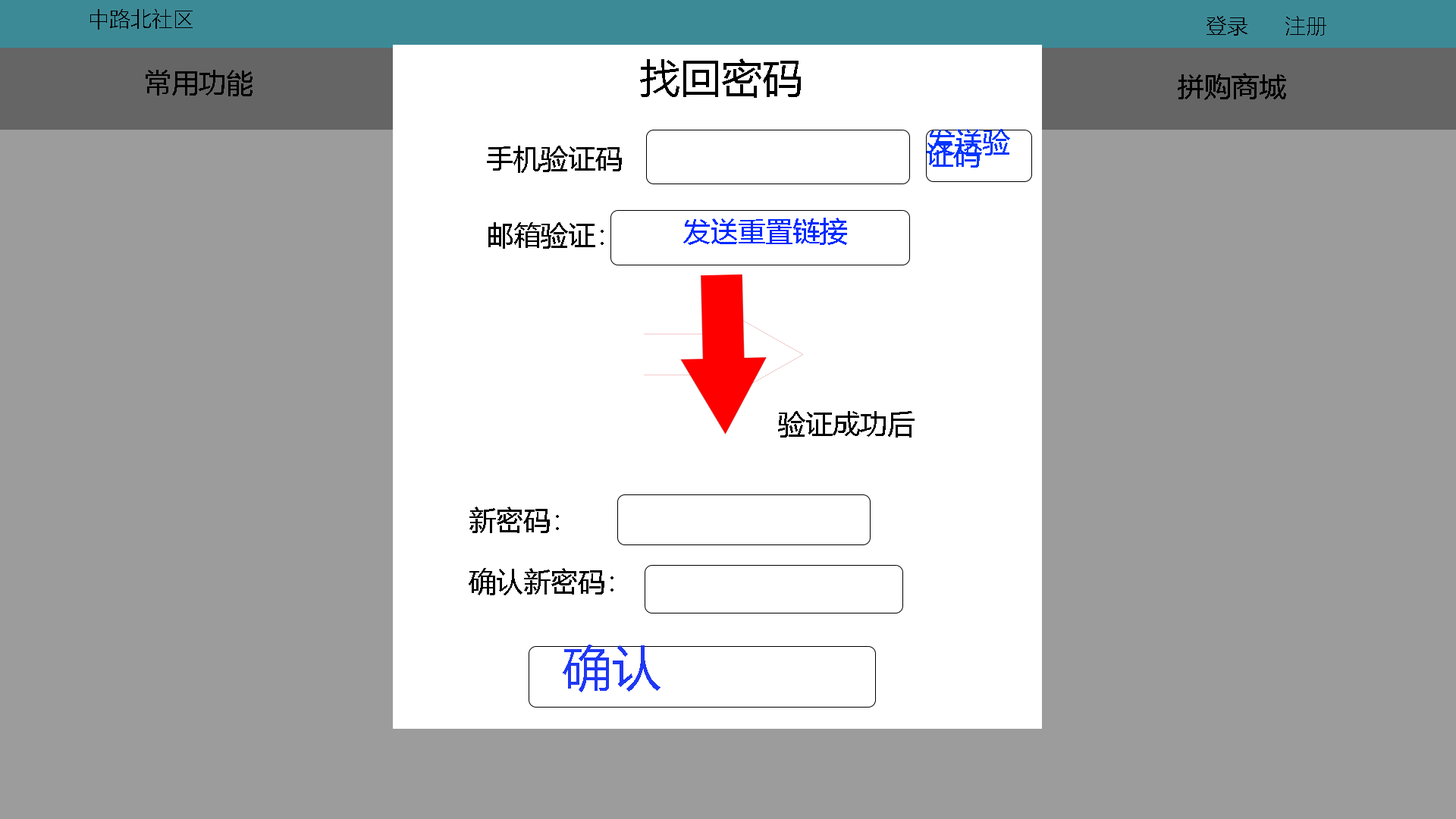
<style>
.page{position:relative;width:1456px;height:819px;background:#9c9c9c}
.page>*{position:absolute;margin:0}
.t1{font:21.2px "MicrosoftYaHeiLight";color:#000000}
.t2{font:40.9px "MicrosoftYaHei";color:#000000}
.t3{font:27.3px "MicrosoftYaHei";color:#000000}
.t4{font:27.3px "MicrosoftYaHei";color:#0036fe}
.t5{font:27.3px "MicrosoftYaHei";color:#002aff}
.t6{font:49.3px "MicrosoftYaHei";color:#1f38f4}
</style>
<div class="page">
<p class="t1" style="left:90px;top:9px;width:103px;height:21px">中路北社区</p>
<p class="t1" style="left:1206px;top:16px;width:120px;height:20px">登录      注册</p>
<p class="t2" style="left:640px;top:58px;width:161px;height:40px">找回密码</p>
<p class="t3" style="left:146px;top:70px;width:107px;height:26px">常用功能</p>
<p class="t3" style="left:1178px;top:73px;width:108px;height:27px">拼购商城</p>
<p class="t4" style="left:927px;top:129px;width:83px;height:39px">发送验证码</p>
<p class="t3" style="left:487px;top:146px;width:135px;height:27px">手机验证码</p>
<p class="t5" style="left:683px;top:218px;width:164px;height:27px">发送重置链接</p>
<p class="t3" style="left:488px;top:222px;width:116px;height:27px">邮箱验证：</p>
<p class="t3" style="left:778px;top:411px;width:137px;height:27px">验证成功后</p>
<p class="t3" style="left:469px;top:507px;width:90px;height:26px">新密码：</p>
<p class="t3" style="left:469px;top:568px;width:144px;height:27px">确认新密码：</p>
<p class="t6" style="left:563px;top:645px;width:97px;height:47px">确认</p>
</div>
